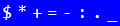
<style>
.page{position:relative;width:120px;height:26px;background:#0000ff}
.page>*{position:absolute;margin:0}
.t1{font:18px "Consolas";letter-spacing:0.4em;color:#ffffff}
</style>
<div class="page">
<p class="t1" style="left:3px;top:5px;width:9px;height:15px">$</p>
<p class="t1" style="left:19px;top:5px;width:7px;height:7px">*</p>
<p class="t1" style="left:33px;top:9px;width:9px;height:9px">+</p>
<p class="t1" style="left:48px;top:11px;width:9px;height:4px">=</p>
<p class="t1" style="left:64px;top:13px;width:6px;height:1px">-</p>
<p class="t1" style="left:81px;top:9px;width:3px;height:9px">:</p>
<p class="t1" style="left:95px;top:15px;width:4px;height:3px">.</p>
<p class="t1" style="left:107px;top:21px;width:11px;height:1px">_</p>
</div>
